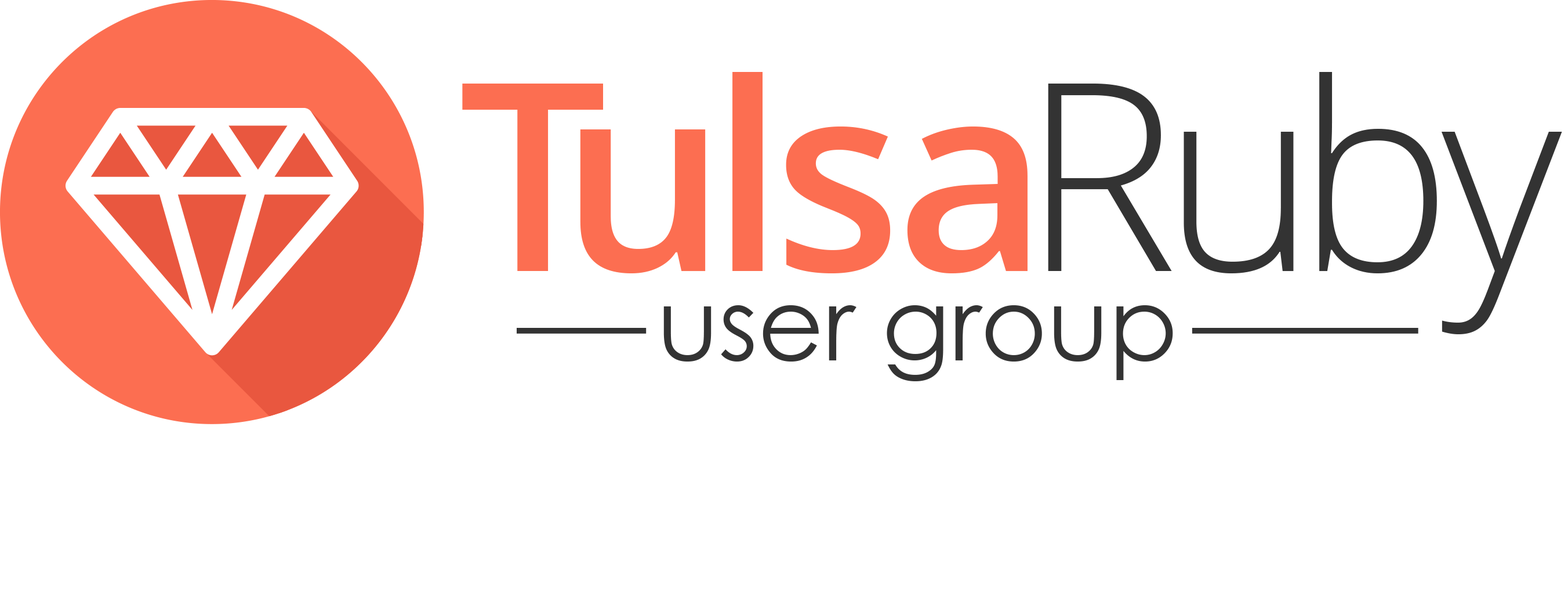
<style>
.page{position:relative;width:1568px;height:607px;background:#ffffff}
.page>*{position:absolute;margin:0}
.t1{font:262.3px "OpenSans-Semibold";letter-spacing:0.02em;color:#fc6e51}
.t2{font:262.3px "OpenSans-Light";letter-spacing:0.02em;color:#333333}
.t3{font:101.3px "CenturyGothic";color:#333333}
</style>
<div class="page">
<p class="t1" style="left:462px;top:72px;width:1100px;height:262px">Tulsa<span class="t2">Ruby</span></p>
<p class="t3" style="left:663px;top:305px;width:510px;height:76px">user group</p>
</div>
